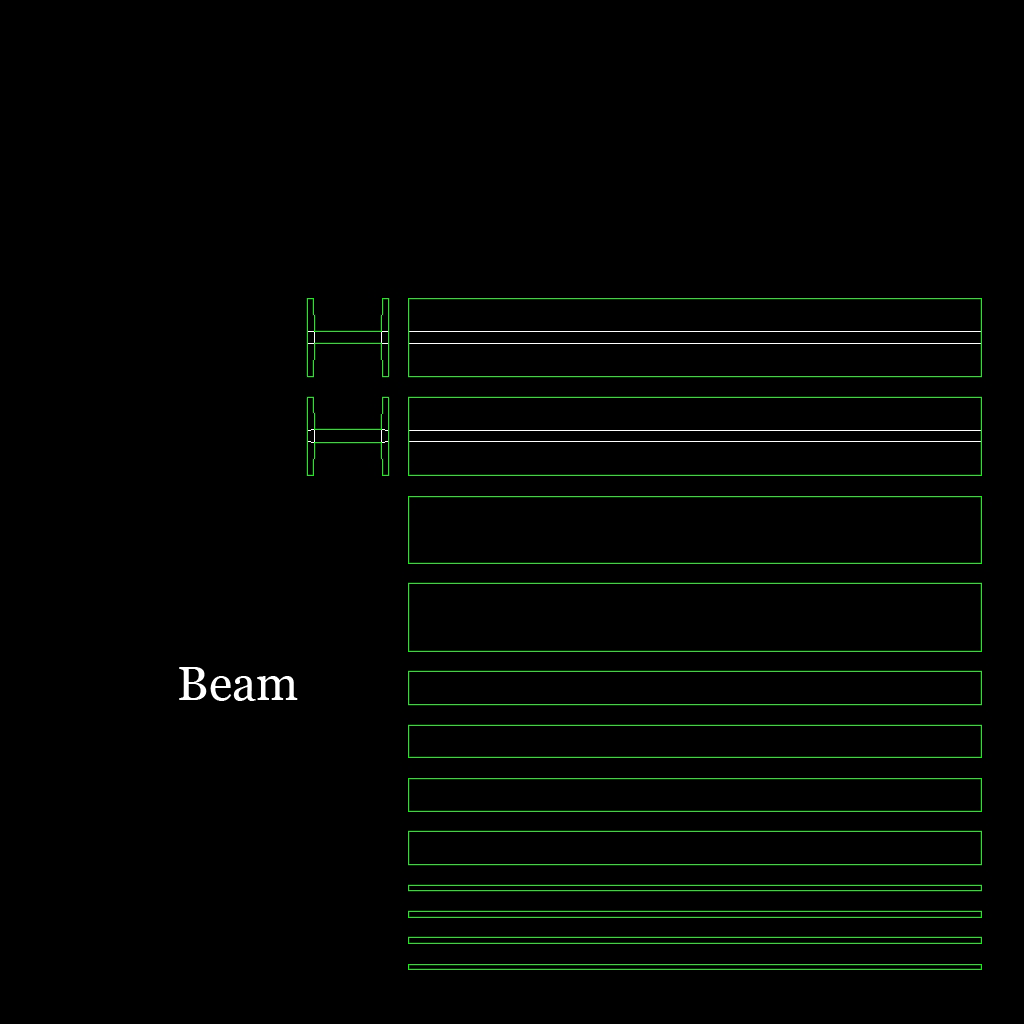
<style>
.page{position:relative;width:1024px;height:1024px;background:#000000}
.page>*{position:absolute;margin:0}
.t1{font:48px "Georgia";color:#ffffff}
</style>
<div class="page">
<p class="t1" style="left:179px;top:667px;width:119px;height:34px">Beam</p>
</div>
